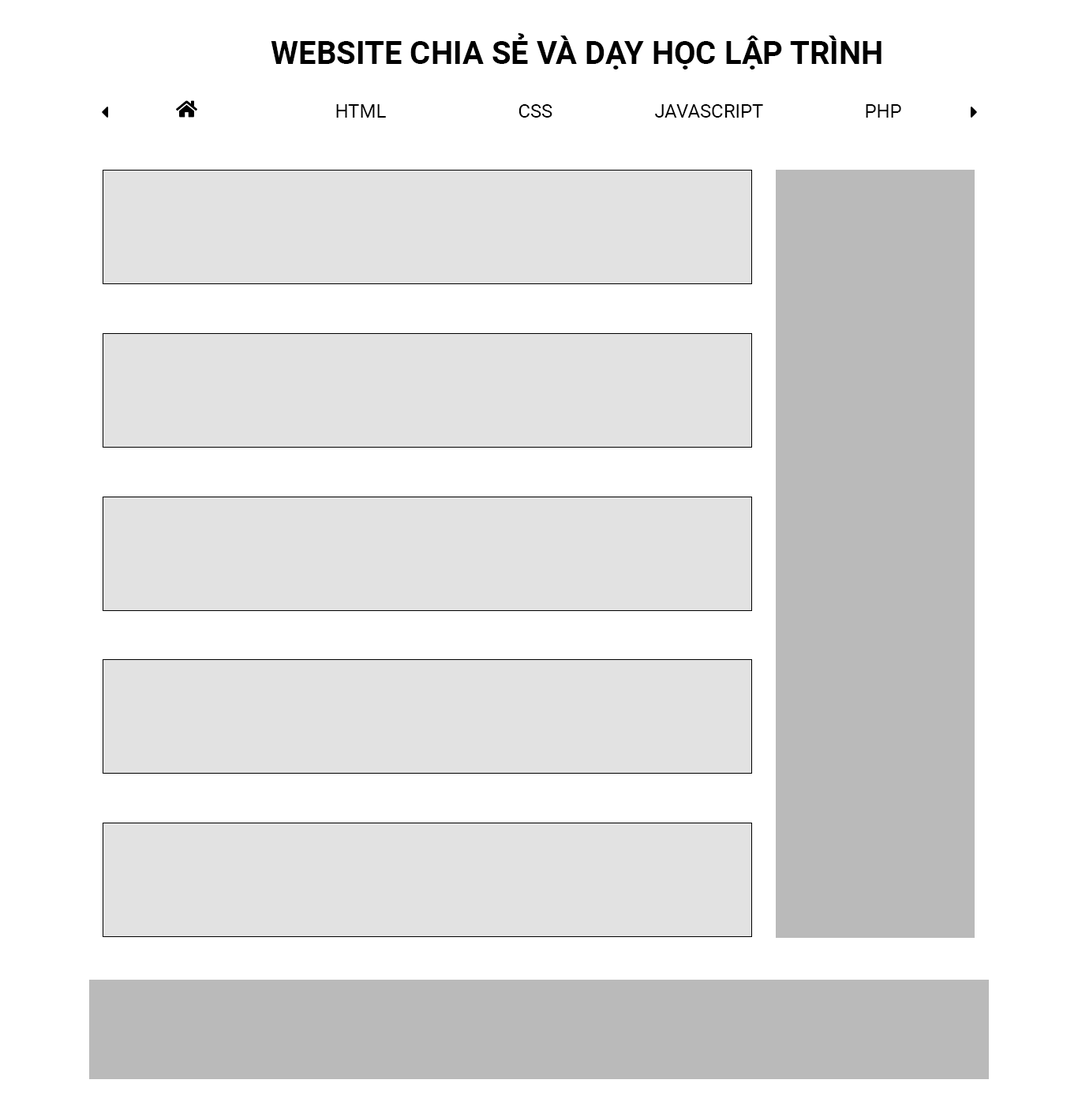
<style>
.page{position:relative;width:1078px;height:1106px;background:#ffffff}
.page>*{position:absolute;margin:0}
.t1{font:31.6px "Roboto-Bold";color:#000000}
.t2{font:18.9px "Roboto-Regular";color:#000000}
</style>
<div class="page">
<p class="t1" style="left:271px;top:33px;width:611px;height:36px">WEBSITE CHIA SẺ VÀ DẠY HỌC LẬP TRÌNH</p>
<p class="t2" style="left:336px;top:104px;width:50px;height:14px">HTML</p>
<p class="t2" style="left:519px;top:104px;width:34px;height:14px">CSS</p>
<p class="t2" style="left:655px;top:104px;width:108px;height:14px">JAVASCRIPT</p>
<p class="t2" style="left:866px;top:104px;width:35px;height:14px">PHP</p>
</div>
